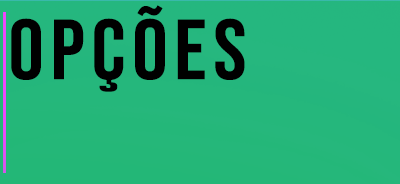
<style>
.page{position:relative;width:400px;height:184px}
.page>*{position:absolute;margin:0}
.t1{font:85px "BebasNeue-Regular";letter-spacing:0.075em;color:#000000;scale:1.04 1}
</style>
<div class="page">
<p class="t1" style="left:11px;top:5px;width:234px;height:87px">OPÇÕES</p>
</div>
